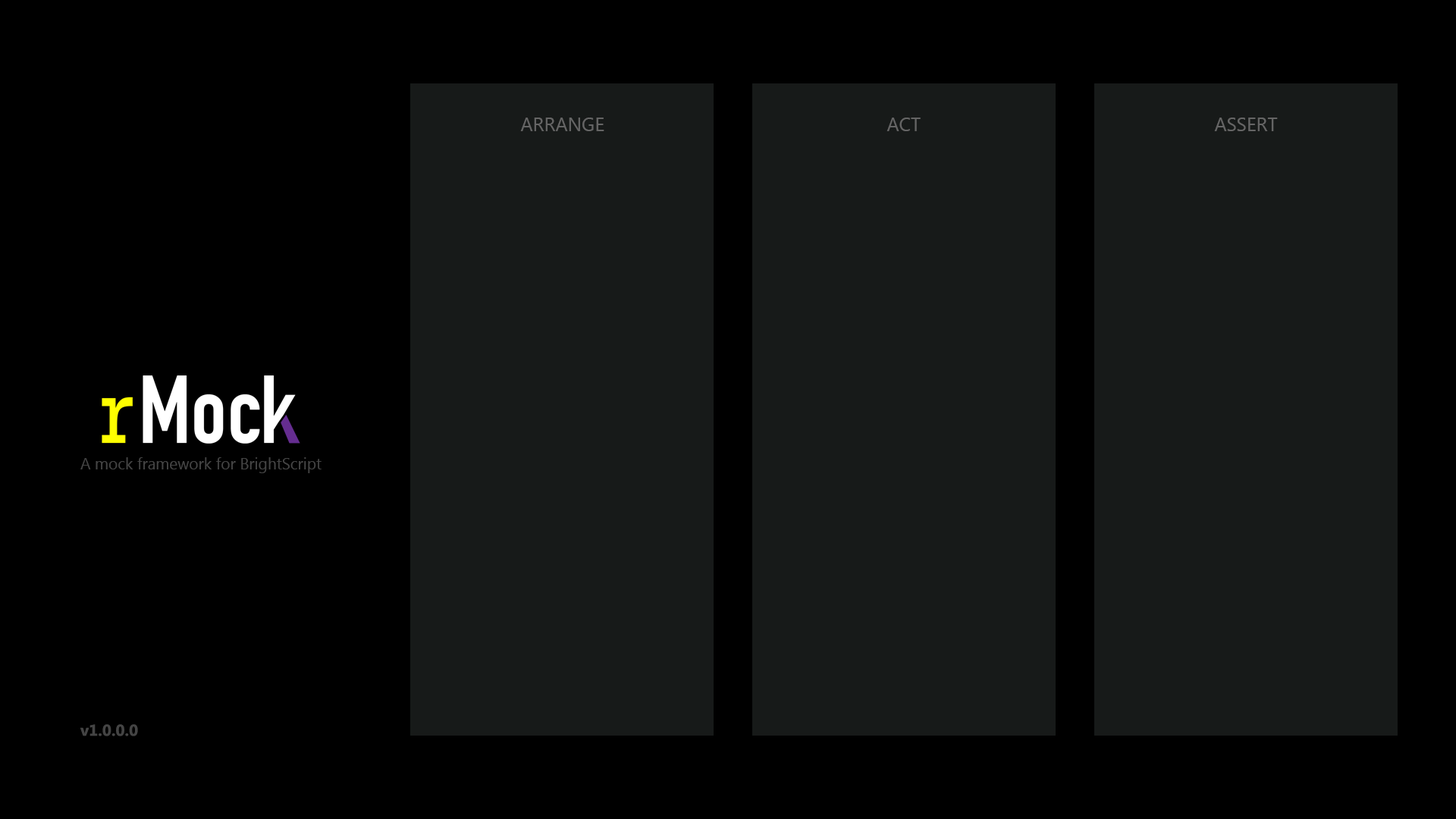
<style>
.page{position:relative;width:1456px;height:819px;background:#171a19}
.page>*{position:absolute;margin:0}
.t1{font:19px "MicrosoftTaiLe";color:#656565}
.t2{font:15.8px "MicrosoftTaiLe";color:#444444}
.t3{font:15.8px "MicrosoftTaiLe-Bold";color:#444444}
</style>
<div class="page">
<p class="t1" style="left:520px;top:118px;width:84px;height:13px">ARRANGE</p>
<p class="t1" style="left:886px;top:118px;width:35px;height:13px">ACT</p>
<p class="t1" style="left:1214px;top:118px;width:64px;height:13px">ASSERT</p>
<p class="t2" style="left:80px;top:457px;width:242px;height:16px">A mock framework for BrightScript</p>
<p class="t3" style="left:80px;top:724px;width:58px;height:12px">v1.0.0.0</p>
</div>
